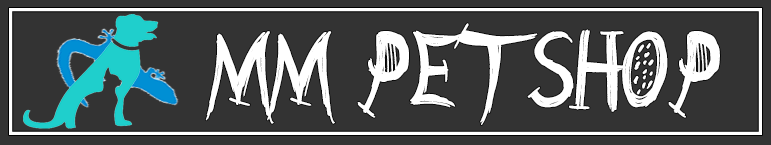
<style>
.page{position:relative;width:771px;height:145px;background:#333333}
.page>*{position:absolute;margin:0}
.t1{font:107.2px "BarnAnimal";color:#ffffff;scale:0.9 1}
</style>
<div class="page">
<p class="t1" style="left:205px;top:23px;width:515px;height:102px">MM Petshop</p>
</div>
